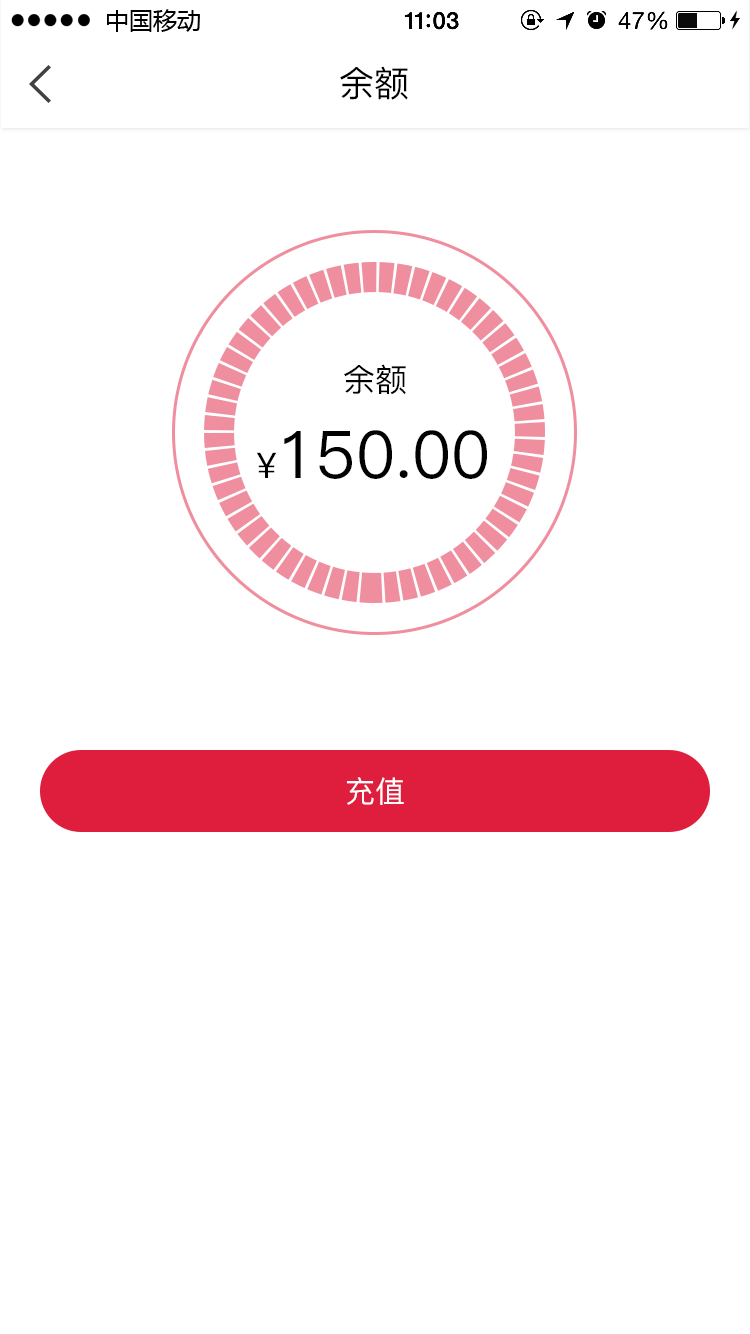
<style>
.page{position:relative;width:750px;height:1334px;background:#ffffff}
.page>*{position:absolute;margin:0}
.t1{font:35.5px "PingFang-SC-Medium";color:#000000}
.t2{font:32px "PingFang-SC-Medium";color:#000000}
.t3{font:65.7px "PingFang-SC-Medium";color:#000000}
.t4{font:35.2px "PingFang-SC-Medium";color:#000000}
.t5{font:30px "PingFang-SC-Medium";color:#ffffff}
</style>
<div class="page">
<p class="t1" style="left:340px;top:66px;width:68px;height:34px">余额</p>
<p class="t2" style="left:344px;top:364px;width:62px;height:31px">余额</p>
<p class="t3" style="left:256px;top:430px;width:231px;height:49px"><span class="t4">¥</span>150.00</p>
<p class="t5" style="left:347px;top:777px;width:57px;height:28px">充值</p>
</div>
